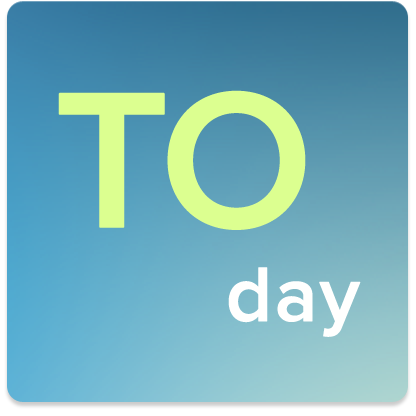
<style>
.page{position:relative;width:416px;height:416px}
.page>*{position:absolute;margin:0}
.t1{font:200px "ProximaNova-Semibold";letter-spacing:-0.075em;color:#dcff90;font-weight:bold}
.t2{font:80px "ProximaNova-Semibold";color:#fffffe;font-weight:bold}
</style>
<div class="page">
<p class="t1" style="left:58px;top:90px;width:248px;height:140px">TO</p>
<p class="t2" style="left:228px;top:267px;width:133px;height:70px">day</p>
</div>
